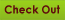
<style>
.page{position:relative;width:65px;height:20px}
.page>*{position:absolute;margin:0}
.t1{font:11.3px "CenturyGothic-Bold";color:#5f0c0c;scale:0.93 1}
</style>
<div class="page">
<p class="t1" style="left:4px;top:5px;width:56px;height:9px">Check Out</p>
</div>
